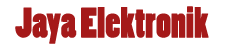
<style>
.page{position:relative;width:227px;height:47px;background:#ffffff}
.page>*{position:absolute;margin:0}
.t1{font:40px "PoplarStd";color:#a51919}
</style>
<div class="page">
<p class="t1" style="left:15px;top:6px;width:194px;height:38px">Jaya Elektronik</p>
</div>
